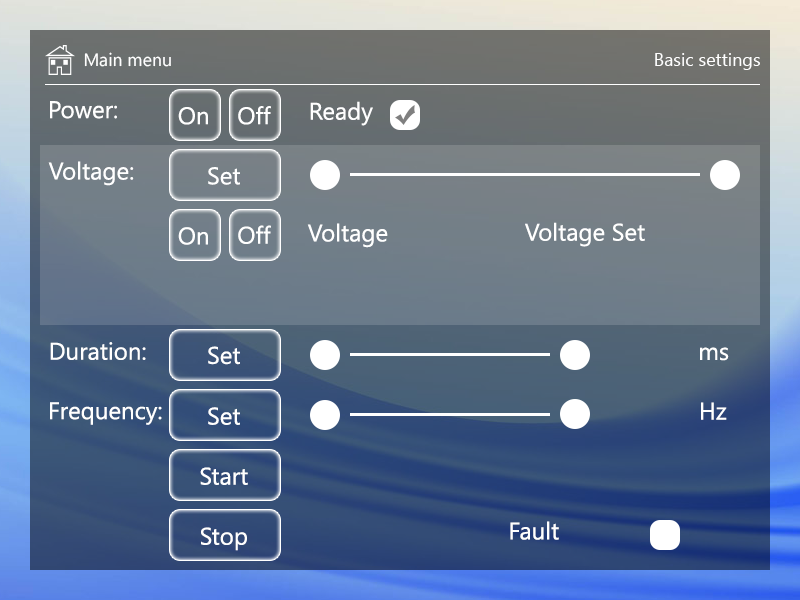
<style>
.page{position:relative;width:800px;height:600px}
.page>*{position:absolute;margin:0}
.t1{font:18px "SegoeUI";color:#ffffff}
.t2{font:24px "SegoeUI";color:#ffffff}
</style>
<div class="page">
<p class="t1" style="left:84px;top:52px;width:87px;height:15px">Main menu</p>
<p class="t1" style="left:655px;top:53px;width:105px;height:17px">Basic settings</p>
<p class="t2" style="left:50px;top:101px;width:67px;height:18px">Power:</p>
<p class="t2" style="left:310px;top:101px;width:63px;height:25px">Ready</p>
<p class="t2" style="left:178px;top:107px;width:30px;height:18px">On</p>
<p class="t2" style="left:238px;top:106px;width:33px;height:19px">Off</p>
<p class="t2" style="left:48px;top:161px;width:86px;height:25px">Voltage:</p>
<p class="t2" style="left:208px;top:167px;width:32px;height:18px">Set</p>
<p class="t2" style="left:525px;top:222px;width:120px;height:25px">Voltage Set</p>
<p class="t2" style="left:178px;top:227px;width:30px;height:18px">On</p>
<p class="t2" style="left:238px;top:225px;width:33px;height:19px">Off</p>
<p class="t2" style="left:307px;top:223px;width:81px;height:25px">Voltage</p>
<p class="t2" style="left:50px;top:342px;width:96px;height:18px">Duration:</p>
<p class="t2" style="left:208px;top:346px;width:32px;height:19px">Set</p>
<p class="t2" style="left:700px;top:347px;width:29px;height:14px">ms</p>
<p class="t2" style="left:50px;top:402px;width:112px;height:23px">Frequency:</p>
<p class="t2" style="left:208px;top:407px;width:32px;height:18px">Set</p>
<p class="t2" style="left:701px;top:402px;width:26px;height:18px">Hz</p>
<p class="t2" style="left:200px;top:467px;width:48px;height:18px">Start</p>
<p class="t2" style="left:510px;top:521px;width:49px;height:19px">Fault</p>
<p class="t2" style="left:201px;top:527px;width:46px;height:24px">Stop</p>
</div>
